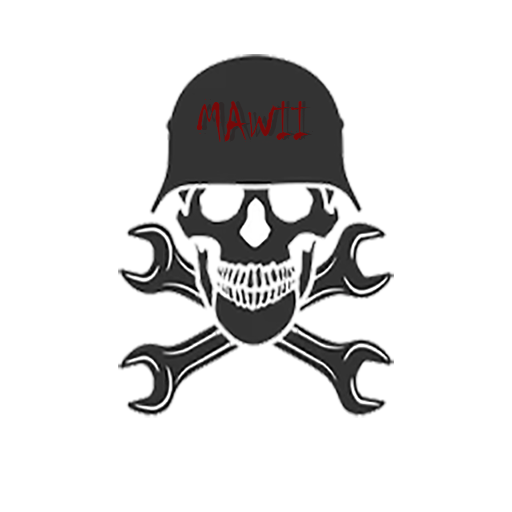
<style>
.page{position:relative;width:512px;height:512px;background:#ffffff}
.page>*{position:absolute;margin:0}
.t1{font:54.9px "Chiller-Regular";color:#770909;scale:0.86 1}
</style>
<div class="page">
<p class="t1" style="left:196px;top:99px;width:113px;height:43px">MAWII</p>
</div>
